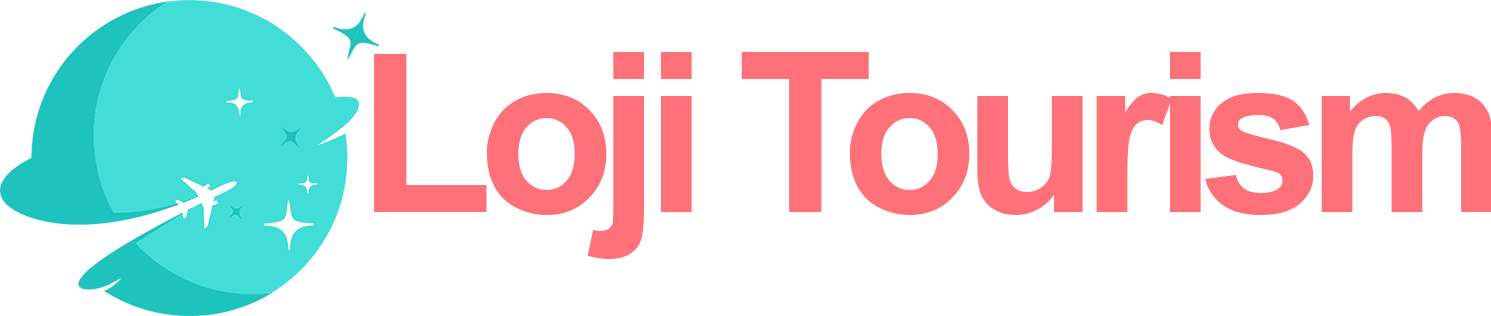
<style>
.page{position:relative;width:1491px;height:316px;background:#ffffff}
.page>*{position:absolute;margin:0}
.t1{font:222.9px "Arial-BoldMT";letter-spacing:-0.07em;color:#ff7178}
</style>
<div class="page">
<p class="t1" style="left:374px;top:51px;width:1118px;height:208px">Loji Tourism</p>
</div>
